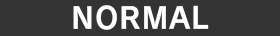
<style>
.page{position:relative;width:280px;height:36px;background:#333333}
.page>*{position:absolute;margin:0}
.t1{font:29.3px "RodinPro-B";letter-spacing:0.024em;color:#ffffff}
</style>
<div class="page">
<p class="t1" style="left:73px;top:5px;width:136px;height:25px">NORMAL</p>
</div>
